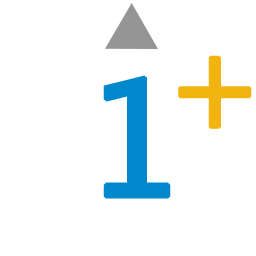
<style>
.page{position:relative;width:256px;height:256px;background:#ffffff}
.page>*{position:absolute;margin:0}
.t1{font:120px "LucidaGrande";letter-spacing:-0.1em;color:#f1b410;font-weight:bold}
.t2{font:160px "LucidaGrande";letter-spacing:-0.1em;color:#0088cc;font-weight:bold}
</style>
<div class="page">
<p class="t1" style="left:178px;top:55px;width:74px;height:74px">+</p>
<p class="t2" style="left:103px;top:75px;width:68px;height:124px">1</p>
</div>
